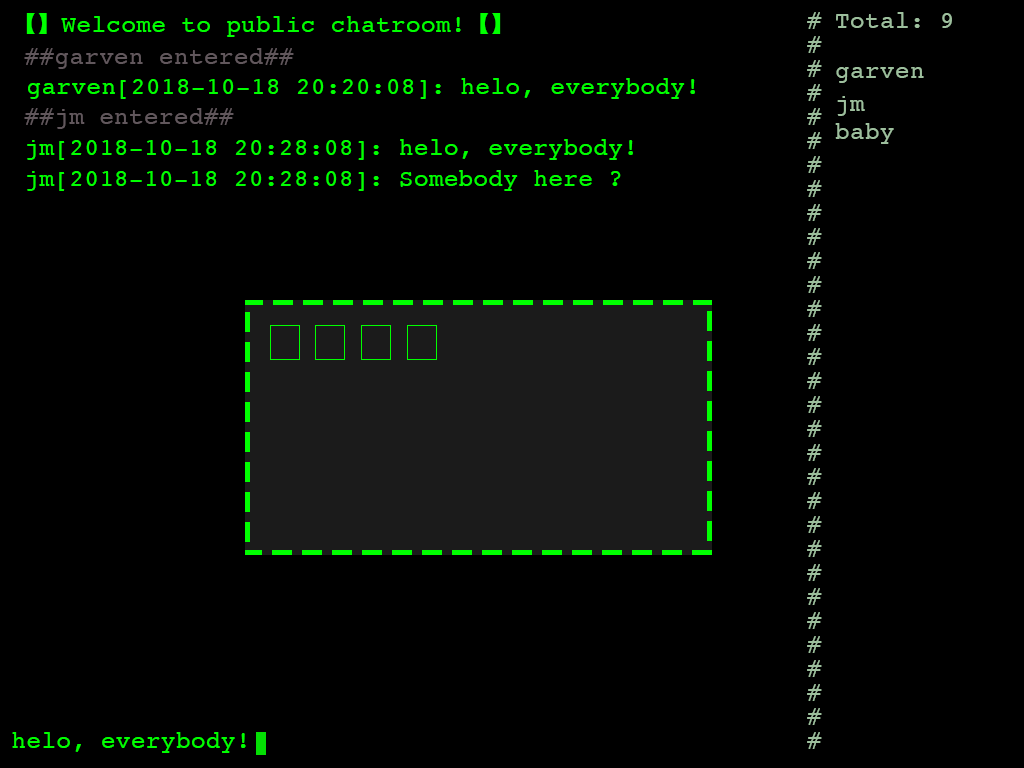
<style>
.page{position:relative;width:1024px;height:768px;background:#000000}
.page>*{position:absolute;margin:0}
.t1{font:24px "Courier";letter-spacing:0.024em;color:#00ff00}
.t2{font:24px "STHeitiSC-Light";letter-spacing:0.024em;color:#00ff00}
.t3{font:24px/24px "Courier";letter-spacing:0.024em;color:#9dbf9d}
.t4{font:24px "Courier";letter-spacing:0.024em;color:#9dbf9d}
.t5{font:24px "Courier";letter-spacing:0.024em;color:#61575c}
</style>
<div class="page">
<p class="t1" style="left:26px;top:13px;width:475px;height:24px"><span class="t2">【】</span>Welcome to public chatroom!<span class="t2">【】</span></p>
<p class="t3" style="left:807px;top:12px;width:15px;height:737px">###############################</p>
<p class="t4" style="left:836px;top:12px;width:116px;height:16px">Total: 9</p>
<p class="t5" style="left:24px;top:48px;width:270px;height:21px">##garven entered##</p>
<p class="t1" style="left:28px;top:78px;width:667px;height:21px">garven[2018-10-18 20:20:08]: helo, everybody!</p>
<p class="t4" style="left:836px;top:67px;width:88px;height:16px">garven</p>
<p class="t4" style="left:837px;top:96px;width:28px;height:20px">jm</p>
<p class="t5" style="left:24px;top:108px;width:210px;height:21px">##jm entered##</p>
<p class="t4" style="left:835px;top:123px;width:59px;height:21px">baby</p>
<p class="t1" style="left:27px;top:139px;width:606px;height:21px">jm[2018-10-18 20:28:08]: helo, everybody!</p>
<p class="t1" style="left:27px;top:170px;width:594px;height:21px">jm[2018-10-18 20:28:08]: Somebody here ?</p>
<p class="t1" style="left:12px;top:732px;width:234px;height:21px">helo, everybody!</p>
</div>
